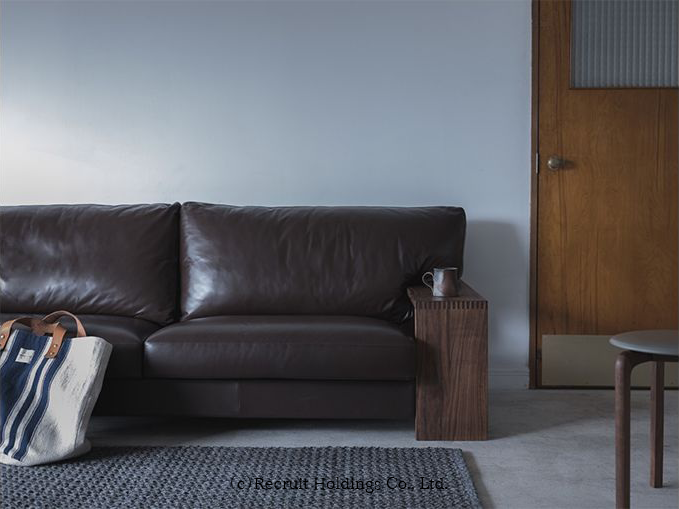
<style>
.page{position:relative;width:679px;height:509px}
.page>*{position:absolute;margin:0}
.t1{font:16px "Honoka-Mincho";color:#000000}
</style>
<div class="page">
<p class="t1" style="left:231px;top:475px;width:217px;height:18px">（c）Recruit Holdings Co., Ltd.</p>
</div>
